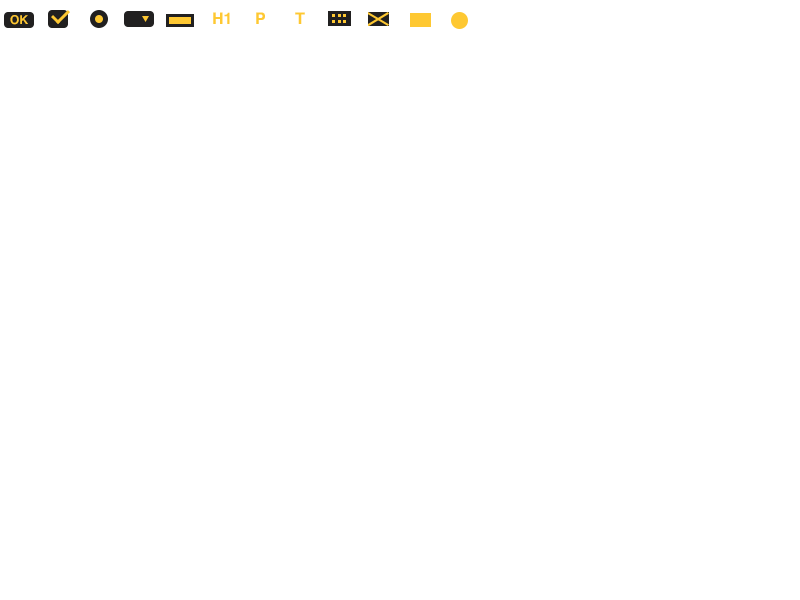
<style>
.page{position:relative;width:800px;height:600px;background:#ffffff}
.page>*{position:absolute;margin:0}
.t1{font:12px "Helvetica-Bold";color:#fec832}
.t2{font:16px "Helvetica-Bold";color:#fec832}
</style>
<div class="page">
<p class="t1" style="left:10px;top:15px;width:18px;height:10px">OK</p>
<p class="t2" style="left:213px;top:12px;width:17px;height:12px">H1</p>
<p class="t2" style="left:256px;top:12px;width:9px;height:12px">P</p>
<p class="t2" style="left:295px;top:12px;width:10px;height:12px">T</p>
</div>
